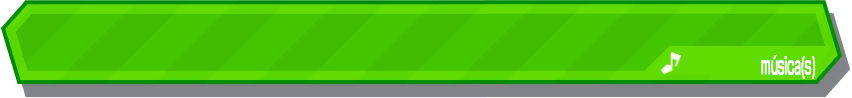
<style>
.page{position:relative;width:852px;height:98px;background:#45c500}
.page>*{position:absolute;margin:0}
.t1{font:22.7px "NewRodinPro-B";letter-spacing:-0.005em;color:#ffffff;scale:0.45 1}
</style>
<div class="page">
<p class="t1" style="left:761px;top:55px;width:55px;height:24px">música(s)</p>
</div>
